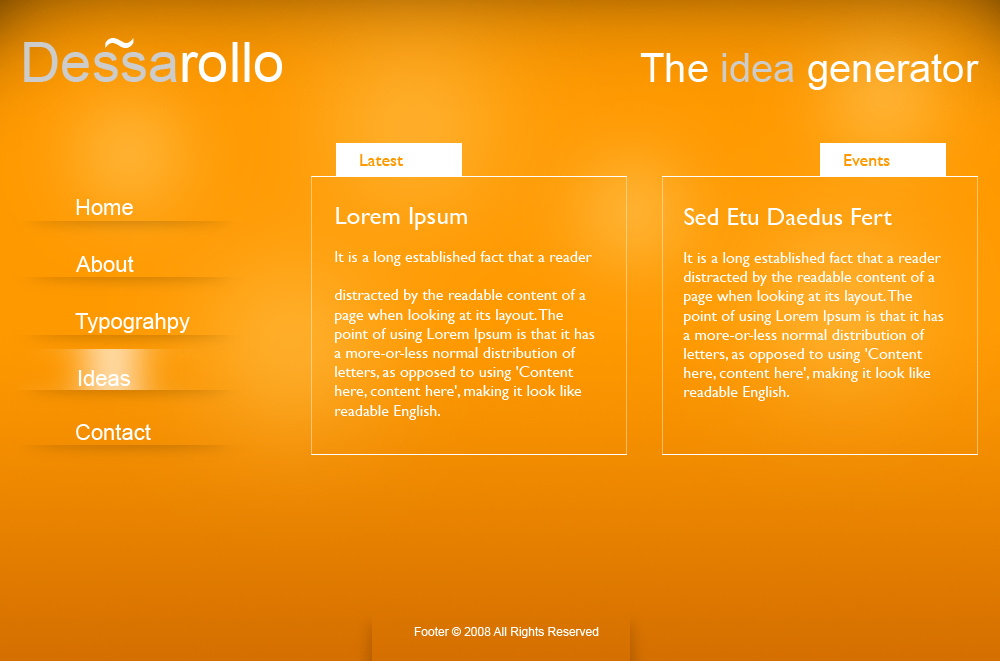
<style>
.page{position:relative;width:1000px;height:661px}
.page>*{position:absolute;margin:0}
.t1{font:56px "ArialMT";color:#ffffff}
.t2{font:56px "ArialMT";color:#cccccc}
.t3{font:40px "ArialMT";color:#ffffff}
.t4{font:40px "ArialMT";color:#cccccc}
.t5{font:18px "GillSans";color:#ff9900}
.t6{font:22px "ArialMT";color:#ffffff}
.t7{font:16px "GillSans";color:#ffffff}
.t8{font:25px "GillSans";color:#ffffff}
.t9{font:12px "ArialMT";color:#ffffff}
</style>
<div class="page">
<p class="t1" style="left:105px;top:38px;width:29px;height:10px">~</p>
<p class="t2" style="left:24px;top:42px;width:258px;height:40px">Dessa<span class="t1">rollo</span></p>
<p class="t3" style="left:640px;top:53px;width:339px;height:37px">The <span class="t4">idea </span>generator</p>
<p class="t5" style="left:360px;top:154px;width:44px;height:12px">Latest</p>
<p class="t5" style="left:844px;top:154px;width:46px;height:12px">Events</p>
<p class="t6" style="left:76px;top:199px;width:57px;height:16px">Home</p>
<p class="t7" style="left:334px;top:207px;width:261px;height:213px"><span class="t8">Lorem Ipsum<br></span><br>It is a long established fact that a reader <br> <br>distracted by the readable content of a page when looking at its layout. The point of using Lorem Ipsum is that it has a more-or-less normal distribution of letters, as opposed to using 'Content here, content here', making it look like readable English.</p>
<p class="t7" style="left:683px;top:208px;width:261px;height:193px"><span class="t8">Sed Etu Daedus Fert<br></span><br>It is a long established fact that a reader distracted by the readable content of a page when looking at its layout. The point of using Lorem Ipsum is that it has a more-or-less normal distribution of letters, as opposed to using 'Content here, content here', making it look like readable English.</p>
<p class="t6" style="left:76px;top:256px;width:58px;height:16px">About</p>
<p class="t6" style="left:75px;top:313px;width:115px;height:20px">Typograhpy</p>
<p class="t6" style="left:78px;top:370px;width:53px;height:16px">Ideas</p>
<p class="t6" style="left:76px;top:424px;width:75px;height:16px">Contact</p>
<p class="t9" style="left:414px;top:627px;width:185px;height:11px">Footer © 2008 All Rights Reserved</p>
</div>
